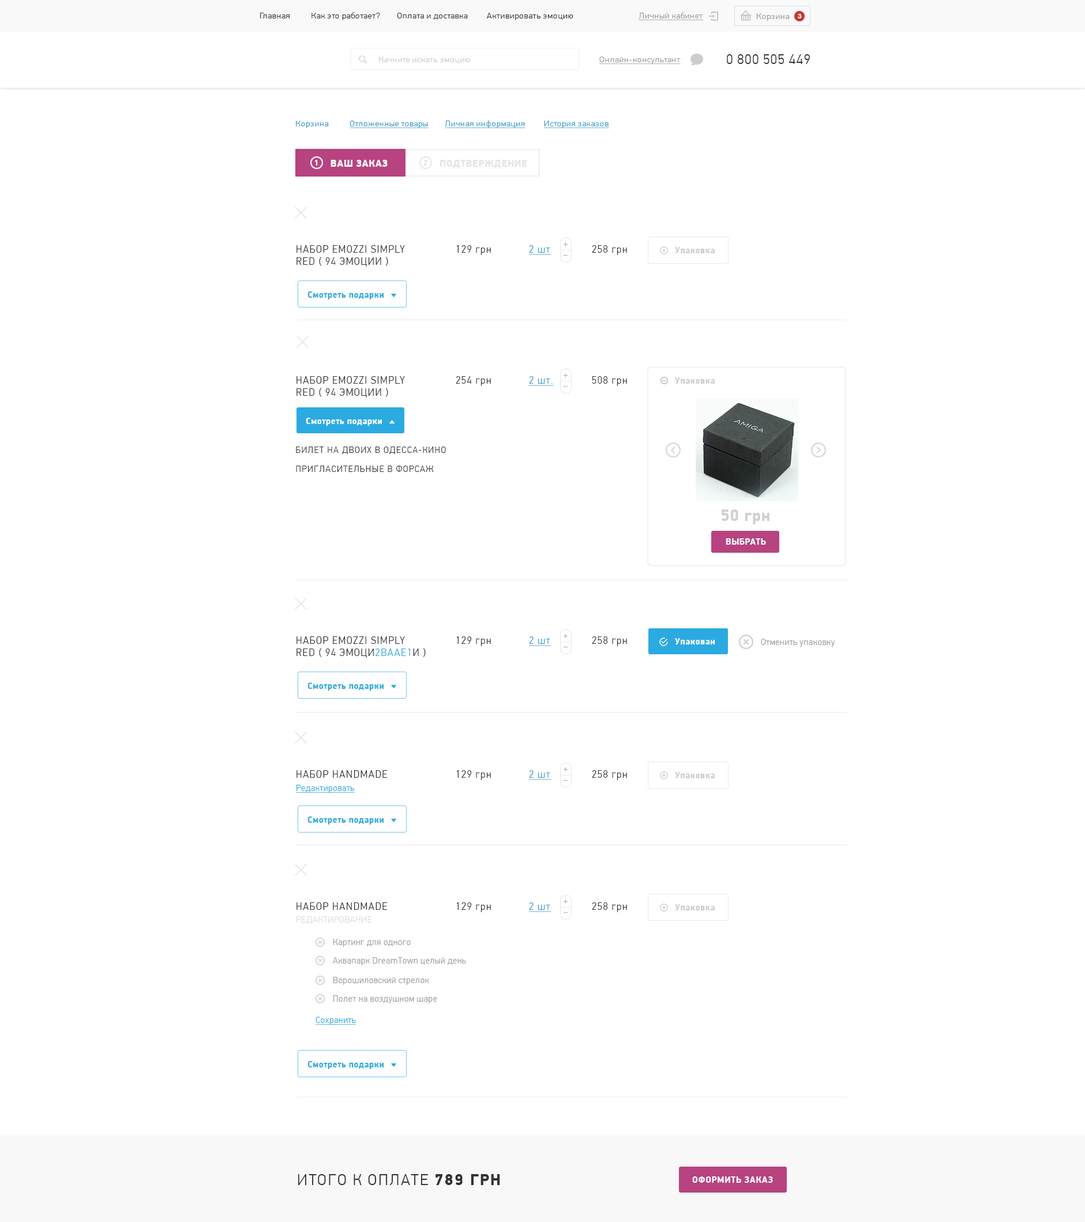
<style>
.page{position:relative;width:1085px;height:1222px;background:#ffffff}
.page>*{position:absolute;margin:0}
.t1{font:8.7px "PFDinTextPro-Light";letter-spacing:0.04em;color:#333333}
.t2{font:8.7px "PFDinTextPro-Light";letter-spacing:0.04em;color:#333333;text-transform:uppercase}
.t3{font:8.7px "PFDinTextPro-Light";letter-spacing:0.04em;color:#999999;text-decoration:underline}
.t4{font:8.7px "PFDinTextPro-Light";letter-spacing:0.04em;color:#999999;text-transform:uppercase;text-decoration:underline}
.t5{font:8.7px "PFDinTextPro-Light";letter-spacing:0.04em;color:#999999}
.t6{font:8.7px "PFDinTextPro-Light";letter-spacing:0.04em;color:#999999;text-transform:uppercase}
.t7{font:6.3px "Arial-Black";letter-spacing:0.04em;color:#ffffff;text-transform:uppercase}
.t8{font:8.7px "PFDinTextPro-Light";letter-spacing:0.04em;color:#cccccc}
.t9{font:13.8px "PFDinTextPro-Light";letter-spacing:0.04em;color:#333333;text-transform:uppercase}
.t10{font:8.7px "PFDinTextPro-Light";letter-spacing:0.04em;color:#3399cc;text-decoration:underline}
.t11{font:8.7px "PFDinTextPro-Light";letter-spacing:0.04em;color:#3399cc}
.t12{font:8.7px "PFDinTextPro-Light";letter-spacing:0.04em;color:#3399cc;text-transform:uppercase;text-decoration:underline}
.t13{font:8.4px "PFDinDisplayPro-Black";letter-spacing:0.03em;color:#ffffff;text-transform:uppercase;scale:0.96 1}
.t14{font:10.2px "PFDinDisplayPro-Black";letter-spacing:0.03em;color:#ffffff;text-transform:uppercase;scale:0.96 1}
.t15{font:8.4px "PFDinDisplayPro-Black";letter-spacing:0.03em;color:#e6e6e6;text-transform:uppercase;scale:0.96 1}
.t16{font:10.2px "PFDinDisplayPro-Black";letter-spacing:0.03em;color:#e6e6e6;text-transform:uppercase;scale:0.96 1}
.t17{font:10.2px/12.1px "PFDinTextPro-Light";letter-spacing:0.09em;color:#333333;text-transform:uppercase;scale:0.96 1}
.t18{font:10.2px "PFDinTextPro-Light";letter-spacing:0.09em;color:#333333;scale:0.96 1}
.t19{font:10.2px "PFDinTextPro-Light";letter-spacing:0.09em;color:#3399cc;text-decoration:underline;scale:0.96 1}
.t20{font:9px "PFDinDisplayPro-Black";letter-spacing:0.04em;color:#cccccc;scale:0.96 1}
.t21{font:9px "PFDinDisplayPro-Black";letter-spacing:0.04em;color:#2baae1;scale:0.96 1}
.t22{font:9px "PFDinDisplayPro-Black";letter-spacing:0.04em;color:#ffffff;scale:0.96 1}
.t23{font:9px "PFDinTextPro-Light";letter-spacing:0.09em;color:#333333;scale:0.96 1}
.t24{font:16.8px "PFDinDisplayPro-Black";letter-spacing:0.04em;color:#d0d0d0;scale:0.96 1}
.t25{font:9px "PFDinDisplayPro-Black";letter-spacing:0.04em;color:#fbfcfc;scale:0.96 1}
.t26{font:10.2px/12.1px "PFDinTextPro-Light";letter-spacing:0.09em;color:#2baae1;text-transform:uppercase;scale:0.96 1}
.t27{font:9px "PFDinTextPro-Light";letter-spacing:0.04em;color:#999999;scale:0.96 1}
.t28{font:10.2px "PFDinTextPro-Light";letter-spacing:0.09em;color:#333333;text-transform:uppercase;scale:0.96 1}
.t29{font:9px "PFDinTextPro-Light";letter-spacing:0.04em;color:#2baae1;text-decoration:underline;scale:0.96 1}
.t30{font:9px "PFDinTextPro-Light";letter-spacing:0.04em;color:#dcdcdc;text-transform:uppercase;scale:0.96 1}
.t31{font:16.2px "PFDinTextPro-Light";letter-spacing:0.09em;color:#333333;scale:0.96 1}
.t32{font:16.2px "PFDinDisplayPro-Black";letter-spacing:0.09em;color:#333333;scale:0.96 1}
.t33{font:9px "PFDinDisplayPro-Black";letter-spacing:0.05em;color:#ffffff;text-transform:uppercase;scale:0.96 1}
</style>
<div class="page">
<p class="t1" style="left:260px;top:12px;width:313px;height:8px"><span class="t2">Г</span>лавная          <span class="t2">к</span>ак это работает?        Оплата и доставка         Активировать эмоцию</p>
<p class="t3" style="left:639px;top:12px;width:64px;height:8px"><span class="t4">л</span>ичный кабинет</p>
<p class="t5" style="left:757px;top:13px;width:33px;height:8px"><span class="t6">К</span>орзина</p>
<p class="t7" style="left:797px;top:14px;width:5px;height:4px">3</p>
<p class="t8" style="left:379px;top:57px;width:91px;height:6px">Начните искать эмоцию</p>
<p class="t3" style="left:599px;top:57px;width:82px;height:7px"><span class="t4">О</span>нлайн-консультант</p>
<p class="t9" style="left:727px;top:54px;width:84px;height:10px">0 800 505 449</p>
<p class="t10" style="left:296px;top:120px;width:313px;height:8px"><span class="t11">Корзина          </span><span class="t12">О</span>тложенные товары        Личная информация         История заказов</p>
<p class="t13" style="left:315px;top:160px;width:3px;height:6px">1</p>
<p class="t14" style="left:331px;top:160px;width:57px;height:7px">Ваш заказ</p>
<p class="t15" style="left:423px;top:160px;width:4px;height:6px">2</p>
<p class="t16" style="left:440px;top:160px;width:87px;height:8px">подтверждение</p>
<p class="t17" style="left:297px;top:245px;width:108px;height:22px">набор emozzi simply<br>red ( 94 эмоции )</p>
<p class="t18" style="left:457px;top:245px;width:34px;height:10px">129 грн</p>
<p class="t19" style="left:529px;top:245px;width:22px;height:10px">2 шт</p>
<p class="t18" style="left:592px;top:245px;width:35px;height:10px">258 грн</p>
<p class="t20" style="left:675px;top:247px;width:40px;height:6px">Упаковка</p>
<p class="t21" style="left:308px;top:291px;width:76px;height:8px">Смотреть подарки</p>
<p class="t17" style="left:297px;top:376px;width:108px;height:21px">набор emozzi simply<br>red ( 94 эмоции )</p>
<p class="t18" style="left:456px;top:376px;width:35px;height:10px">254 грн</p>
<p class="t19" style="left:529px;top:376px;width:25px;height:10px">2 шт.</p>
<p class="t18" style="left:592px;top:376px;width:35px;height:10px">508 грн</p>
<p class="t20" style="left:675px;top:377px;width:40px;height:7px">Упаковка</p>
<p class="t22" style="left:306px;top:418px;width:76px;height:8px">Смотреть подарки</p>
<p class="t23" style="left:296px;top:447px;width:150px;height:7px">БИЛЕТ НА ДВОИХ В ОДЕССА-КИНО</p>
<p class="t23" style="left:296px;top:466px;width:138px;height:6px">ПРИГЛАСИТЕЛЬНЫЕ В ФОРСАЖ</p>
<p class="t24" style="left:721px;top:509px;width:49px;height:15px">50 грн</p>
<p class="t25" style="left:726px;top:538px;width:40px;height:7px">ВЫБРАТЬ</p>
<p class="t17" style="left:297px;top:636px;width:129px;height:22px">набор emozzi simply<br>red ( 94 эмоци<span class="t26">2baae1</span>и )</p>
<p class="t18" style="left:457px;top:636px;width:34px;height:10px">129 грн</p>
<p class="t19" style="left:529px;top:636px;width:22px;height:10px">2 шт</p>
<p class="t18" style="left:592px;top:636px;width:35px;height:10px">258 грн</p>
<p class="t22" style="left:675px;top:638px;width:40px;height:6px">Упакован</p>
<p class="t27" style="left:761px;top:639px;width:74px;height:8px">Отменить упаковку</p>
<p class="t21" style="left:308px;top:682px;width:76px;height:9px">Смотреть подарки</p>
<p class="t28" style="left:297px;top:770px;width:90px;height:8px">набор handmade</p>
<p class="t18" style="left:457px;top:770px;width:34px;height:10px">129 грн</p>
<p class="t19" style="left:529px;top:770px;width:22px;height:10px">2 шт</p>
<p class="t18" style="left:592px;top:770px;width:35px;height:10px">258 грн</p>
<p class="t20" style="left:675px;top:772px;width:40px;height:6px">Упаковка</p>
<p class="t29" style="left:296px;top:785px;width:59px;height:8px">Редактировать</p>
<p class="t21" style="left:308px;top:816px;width:76px;height:8px">Смотреть подарки</p>
<p class="t28" style="left:297px;top:902px;width:90px;height:8px">набор handmade</p>
<p class="t18" style="left:457px;top:902px;width:34px;height:10px">129 грн</p>
<p class="t19" style="left:529px;top:902px;width:22px;height:10px">2 шт</p>
<p class="t18" style="left:592px;top:902px;width:35px;height:10px">258 грн</p>
<p class="t20" style="left:675px;top:904px;width:40px;height:6px">Упаковка</p>
<p class="t30" style="left:297px;top:916px;width:75px;height:8px">Редактирование</p>
<p class="t27" style="left:333px;top:939px;width:78px;height:8px">Картинг для одного</p>
<p class="t27" style="left:333px;top:957px;width:133px;height:8px">Аквапарк DreamTown целый день</p>
<p class="t27" style="left:333px;top:977px;width:96px;height:8px">Ворошиловский стрелок</p>
<p class="t27" style="left:333px;top:995px;width:104px;height:8px">Полет на воздушном шаре</p>
<p class="t29" style="left:316px;top:1017px;width:41px;height:8px">Сохранить</p>
<p class="t21" style="left:308px;top:1061px;width:76px;height:8px">Смотреть подарки</p>
<p class="t31" style="left:298px;top:1174px;width:202px;height:11px">ИТОГО К ОПЛАТЕ <span class="t32">789 ГРН</span></p>
<p class="t33" style="left:692px;top:1176px;width:81px;height:7px">оформить заказ</p>
</div>
